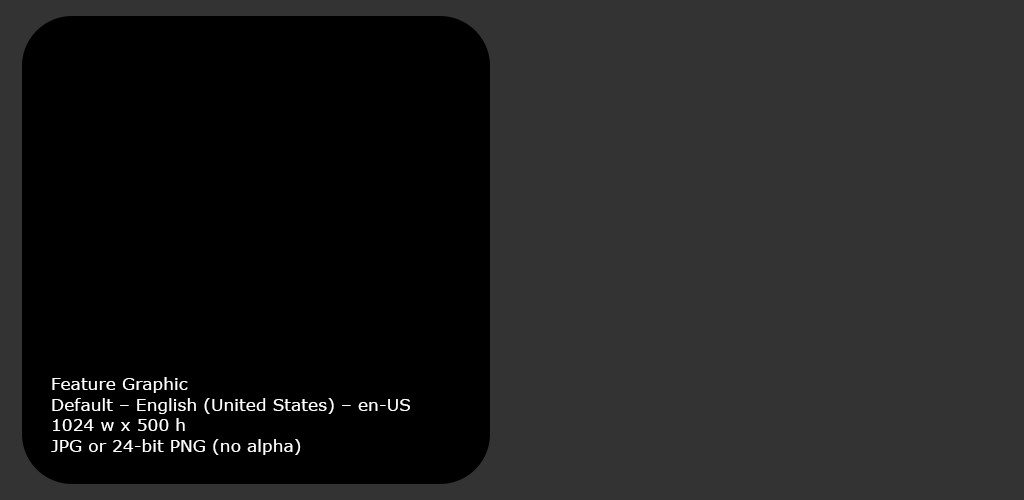
<style>
.page{position:relative;width:1024px;height:500px;background:#333333}
.page>*{position:absolute;margin:0}
.t1{font:17.1px "Verdana";color:#ffffff}
</style>
<div class="page">
<p class="t1" style="left:51px;top:377px;width:359px;height:78px">Feature Graphic <br>Default – English (United States) – en-US<br>1024 w x 500 h<br>JPG or 24-bit PNG (no alpha)</p>
</div>
